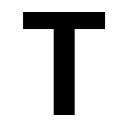
<style>
.page{position:relative;width:128px;height:128px;background:#ffffff}
.page>*{position:absolute;margin:0}
.t1{font:144px "Arial-BoldMT";color:#000000}
</style>
<div class="page">
<p class="t1" style="left:23px;top:12px;width:83px;height:103px">T</p>
</div>
